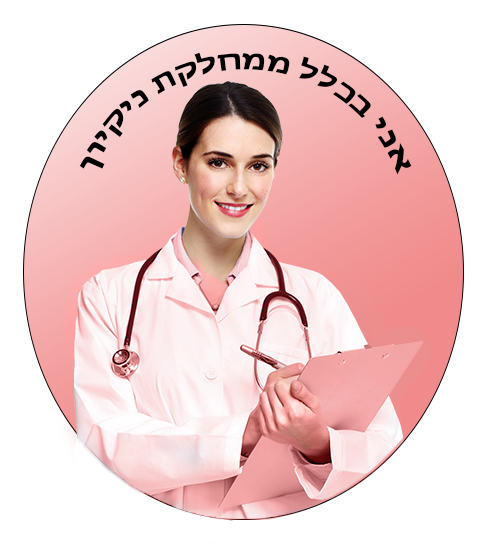
<style>
.page{position:relative;width:487px;height:544px;background:#ffffff}
.page>*{position:absolute;margin:0}
.t1{font:28.8px "MyriadHebrew-Bold";color:#000000}
</style>
<div class="page">
<p class="t1" style="left:79px;top:52px;width:333px;height:123px;text-align:center">אני בכלל ממחלקת ניקיון</p>
</div>
